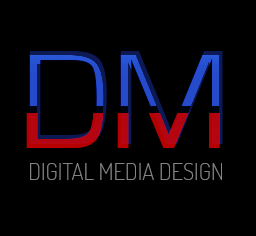
<style>
.page{position:relative;width:256px;height:236px;background:#000000}
.page>*{position:absolute;margin:0}
.t1{font:23px/36px "Dosis-ExtraLight";font-variant:small-caps}
.t2{font:139px "EurostileRegular";font-variant:small-caps}
</style>
<div class="page">
<p class="t1" style="left:29px;top:51px;width:194px;height:129px;text-align:center"><span class="t2">DM<br></span>DIGITAL MEDIA DESIGN</p>
</div>
